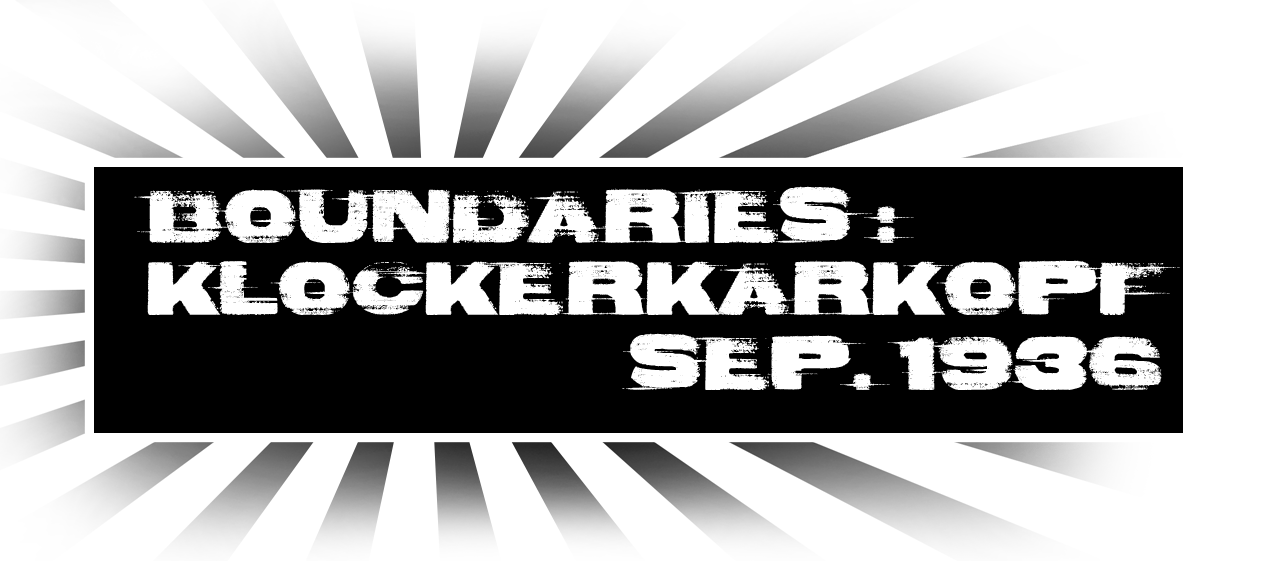
<style>
.page{position:relative;width:1280px;height:578px;background:#ffffff}
.page>*{position:absolute;margin:0}
.t1{font:100px "BadComa";color:#ffffff}
</style>
<div class="page">
<p class="t1" style="left:134px;top:186px;width:780px;height:57px">BOUNDARIES .</p>
<p class="t1" style="left:864px;top:206px;width:50px;height:17px">.</p>
<p class="t1" style="left:147px;top:260px;width:1033px;height:55px">KLOCKERKARKOPF</p>
<p class="t1" style="left:622px;top:333px;width:540px;height:57px">SEP. 1936</p>
</div>
